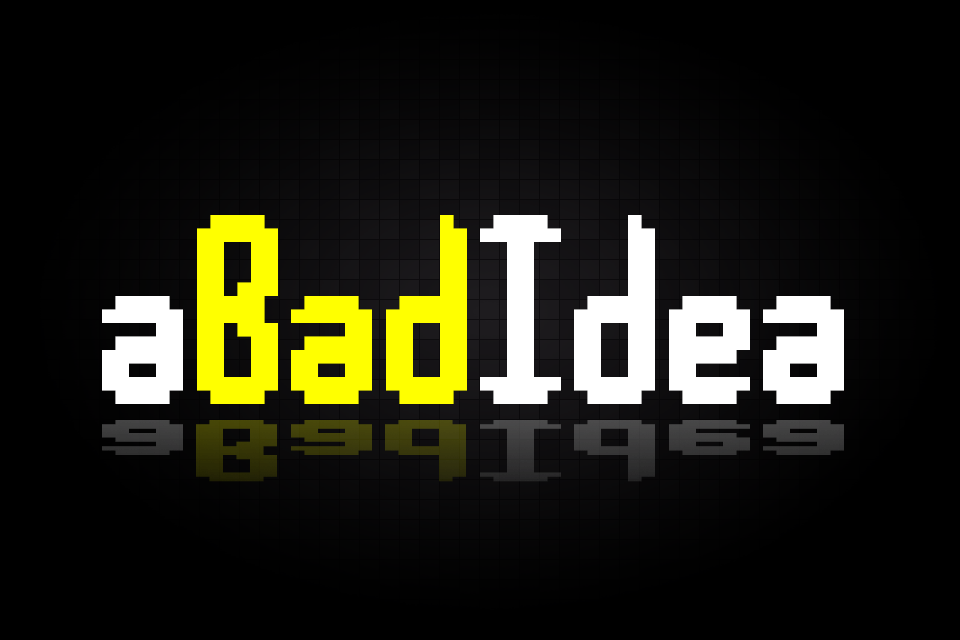
<style>
.page{position:relative;width:960px;height:640px;background:#000000}
.page>*{position:absolute;margin:0}
.t1{font:288px "Jupiter Crash -BRK-";color:#ffffff}
.t2{font:288px "Jupiter Crash -BRK-";color:#ffff00}
.t3{font:93.2px "Jupiter Crash -BRK-";scale:3.09 1}
</style>
<div class="page">
<p class="t1" style="left:102px;top:215px;width:742px;height:189px">a<span class="t2">Bad</span>Idea</p>
<p class="t2" style="left:197px;top:215px;width:270px;height:189px">Bad</p>
<p class="t3" style="left:102px;top:420px;width:742px;height:62px">aBadIdea</p>
</div>
